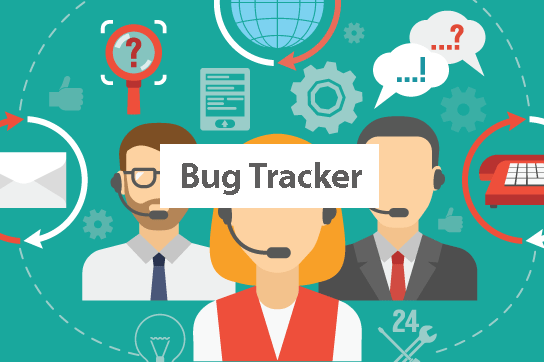
<style>
.page{position:relative;width:544px;height:362px;background:#19a89d}
.page>*{position:absolute;margin:0}
.t1{font:36px "MyriadPro-Bold";color:#5f5e5e}
</style>
<div class="page">
<p class="t1" style="left:182px;top:162px;width:180px;height:33px">Bug Tracker</p>
</div>
